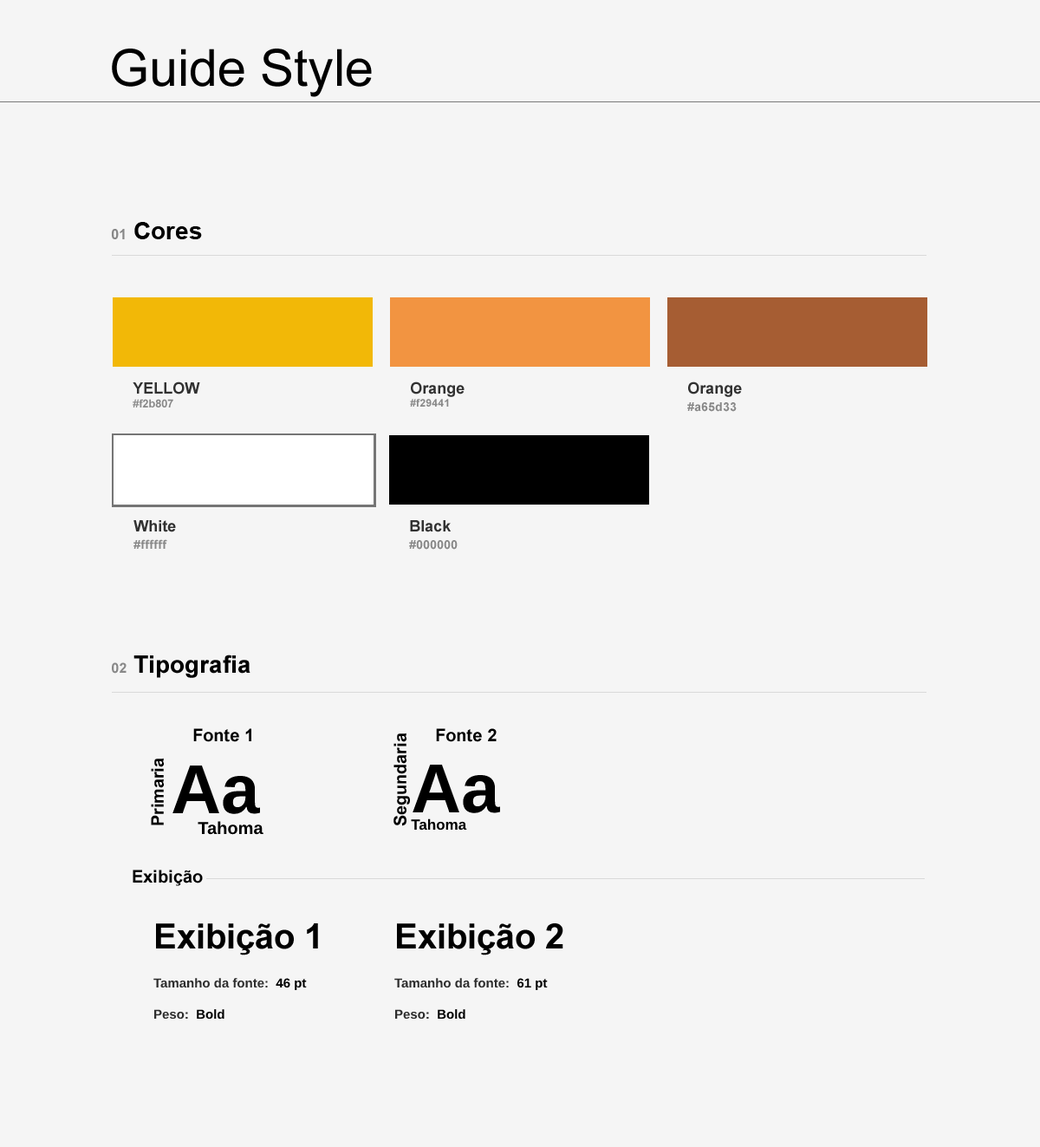
<style>
.page{position:relative;width:1040px;height:1147px;background:#f5f5f5}
.page>*{position:absolute;margin:0}
.t1{font:51.1px "ArialMT";color:#000000}
.t2{font:24.3px "Arial-BoldMT";color:#000000}
.t3{font:13.9px "Arial-BoldMT";color:#888888}
.t4{font:11.3px "Arial-BoldMT";color:#888888}
.t5{font:15.6px "Arial-BoldMT";color:#313131}
.t6{font:10.4px "Arial-BoldMT";color:#888888}
.t7{font:12.1px/17.3px "Arial-BoldMT";color:#888888}
.t8{font:17.3px "Arial-BoldMT";color:#000000}
.t9{font:69.3px "Arial-BoldMT";color:#000000}
.t10{font:14.7px "Arial-BoldMT";color:#000000}
.t11{font:34.7px "Arial-BoldMT";color:#000000}
.t12{font:13px "Arial-BoldMT";color:#2d2d2d}
.t13{font:13px "Arial-BoldMT";color:#000000}
</style>
<div class="page">
<p class="t1" style="left:112px;top:49px;width:260px;height:48px">Guide Style</p>
<p class="t2" style="left:111px;top:222px;width:91px;height:17px"><span class="t3">01 </span>Cores</p>
<p class="t4" style="left:133px;top:381px;width:67px;height:26px"><span class="t5">YELLOW<br></span>#f2b807</p>
<p class="t6" style="left:410px;top:381px;width:55px;height:25px"><span class="t5">Orange<br></span>#f29441</p>
<p class="t7" style="left:687px;top:381px;width:55px;height:31px"><span class="t5">Orange<br></span>#a65d33</p>
<p class="t7" style="left:133px;top:520px;width:43px;height:29px"><span class="t5">White<br></span>#ffffff</p>
<p class="t7" style="left:409px;top:520px;width:49px;height:29px"><span class="t5">Black<br></span>#000000</p>
<p class="t2" style="left:112px;top:654px;width:138px;height:24px"><span class="t3">02 </span>Tipografia</p>
<p class="t8" style="left:193px;top:728px;width:58px;height:14px">Fonte 1</p>
<p class="t8" style="left:393px;top:732px;width:17px;height:94px;rotate:-90deg">Segundaria</p>
<p class="t8" style="left:436px;top:728px;width:61px;height:14px">Fonte 2</p>
<p class="t8" style="left:151px;top:757px;width:13px;height:68px;rotate:-90deg">Primaria</p>
<p class="t8" style="left:172px;top:764px;width:91px;height:71px"><span class="t9">Aa<br>      </span>Tahoma</p>
<p class="t10" style="left:411px;top:764px;width:90px;height:66px"><span class="t9">Aa<br></span>Tahoma</p>
<p class="t8" style="left:133px;top:869px;width:70px;height:17px">Exibição</p>
<p class="t11" style="left:156px;top:923px;width:162px;height:32px">Exibição 1</p>
<p class="t11" style="left:397px;top:923px;width:166px;height:32px">Exibição 2</p>
<p class="t12" style="left:153px;top:978px;width:154px;height:41px">Tamanho da fonte:  <span class="t13">46 pt<br></span><br>Peso:<span class="t13">  Bold</span></p>
<p class="t12" style="left:394px;top:978px;width:154px;height:41px">Tamanho da fonte:  <span class="t13">61 pt<br></span><br>Peso:<span class="t13">  Bold</span></p>
</div>
